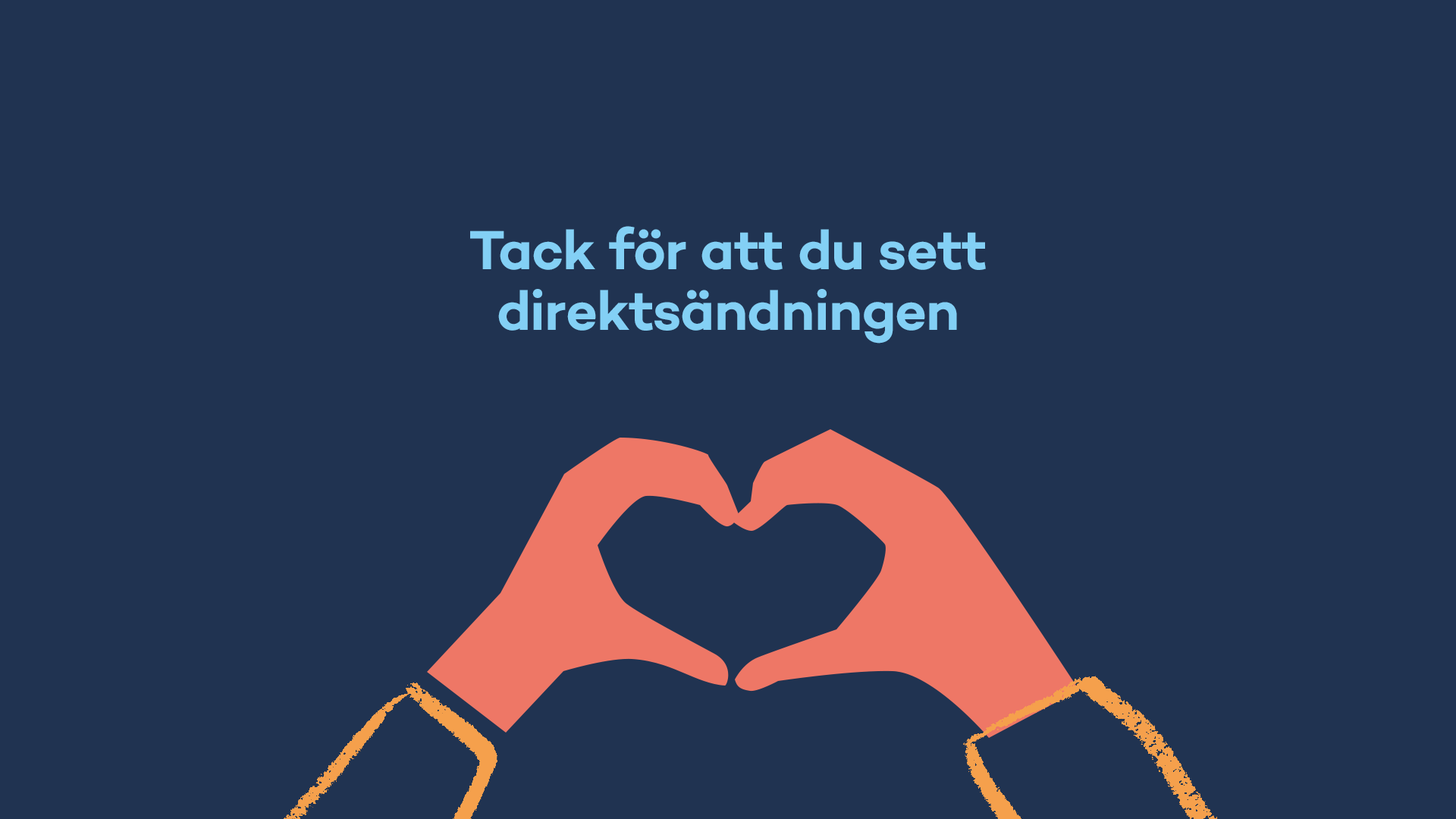
<style>
.page{position:relative;width:1456px;height:819px;background:#203351}
.page>*{position:absolute;margin:0}
.t1{font:56.1px/60.7px "Campton-SemiBold";letter-spacing:-0.01em;color:#83d0f5}
</style>
<div class="page">
<p class="t1" style="left:470px;top:226px;width:516px;height:118px;text-align:center">Tack för att du sett <br>direktsändningen</p>
</div>
